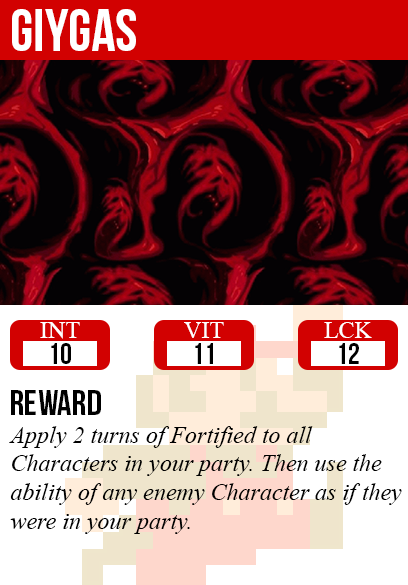
<style>
.page{position:relative;width:408px;height:585px;background:#ffffff}
.page>*{position:absolute;margin:0}
.t1{font:60px "BebasNeue";color:#ffffff}
.t2{font:24px "TimesNewRomanPSMT";color:#ffffff}
.t3{font:30px "BebasNeue";color:#000000}
.t4{font:36px "BebasNeue";color:#000000}
.t5{font:24px "TimesNewRomanPS-ItalicMT";color:#000000}
</style>
<div class="page">
<p class="t1" style="left:12px;top:9px;width:124px;height:42px">giygas</p>
<p class="t2" style="left:40px;top:322px;width:40px;height:17px">INT</p>
<p class="t2" style="left:184px;top:322px;width:40px;height:16px">VIT</p>
<p class="t2" style="left:324px;top:322px;width:48px;height:16px">LCK</p>
<p class="t3" style="left:51px;top:343px;width:20px;height:21px">10</p>
<p class="t3" style="left:195px;top:343px;width:18px;height:21px">11</p>
<p class="t3" style="left:339px;top:343px;width:20px;height:21px">12</p>
<p class="t4" style="left:11px;top:390px;width:90px;height:25px">reward</p>
<p class="t5" style="left:9px;top:426px;width:393px;height:108px">Apply 2 turns of Fortified to all<br>Characters in your party. Then use the<br>ability of any enemy Character as if they<br>were in your party.</p>
</div>
